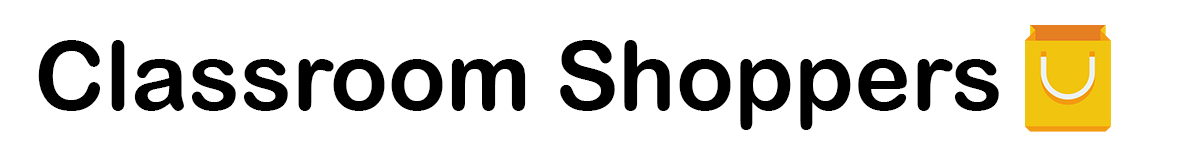
<style>
.page{position:relative;width:1181px;height:157px;background:#ffffff}
.page>*{position:absolute;margin:0}
.t1{font:95.8px "ArialRoundedMTBold";color:#000000}
</style>
<div class="page">
<p class="t1" style="left:38px;top:40px;width:961px;height:90px">Classroom Shoppers</p>
</div>
